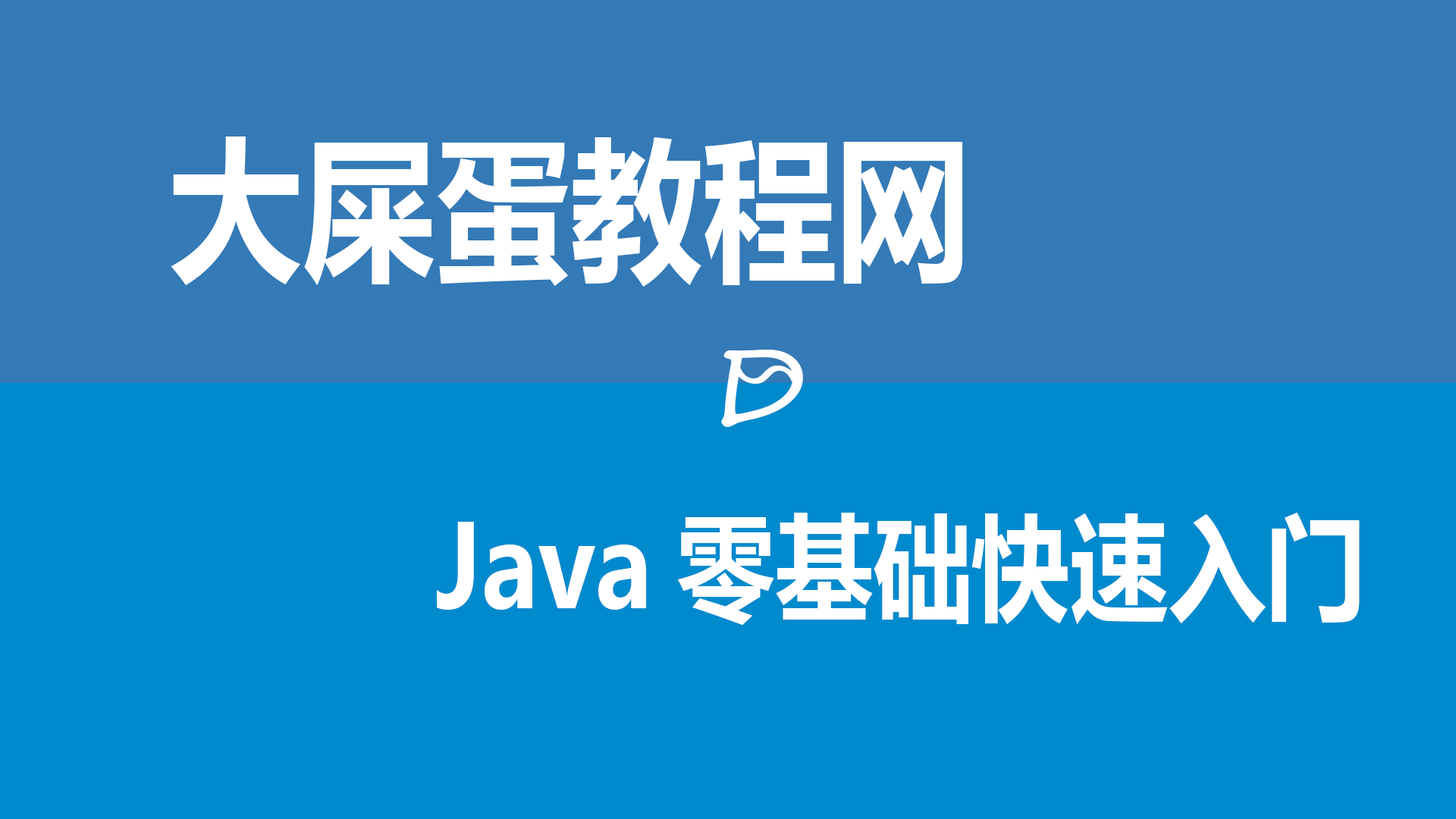
<style>
.page{position:relative;width:1456px;height:819px;background:#008ace}
.page>*{position:absolute;margin:0}
.t1{font:154.8px "MicrosoftYaHei-Bold";color:#ffffff;scale:0.86 1}
.t2{font:102.2px "SegoePrint";color:#ffffff;scale:1.17 1}
.t3{font:53.4px "LithosPro-Regular";color:#ffffff;scale:1.68 1}
.t4{font:114.5px "MicrosoftYaHei-Bold";color:#ffffff;scale:0.86 1}
</style>
<div class="page">
<p class="t1" style="left:171px;top:136px;width:792px;height:151px">大屎蛋教程网</p>
<p class="t2" style="left:721px;top:350px;width:82px;height:77px">D</p>
<p class="t3" style="left:733px;top:366px;width:66px;height:18px">S</p>
<p class="t4" style="left:437px;top:513px;width:923px;height:112px">Java零基础快速入门</p>
</div>
